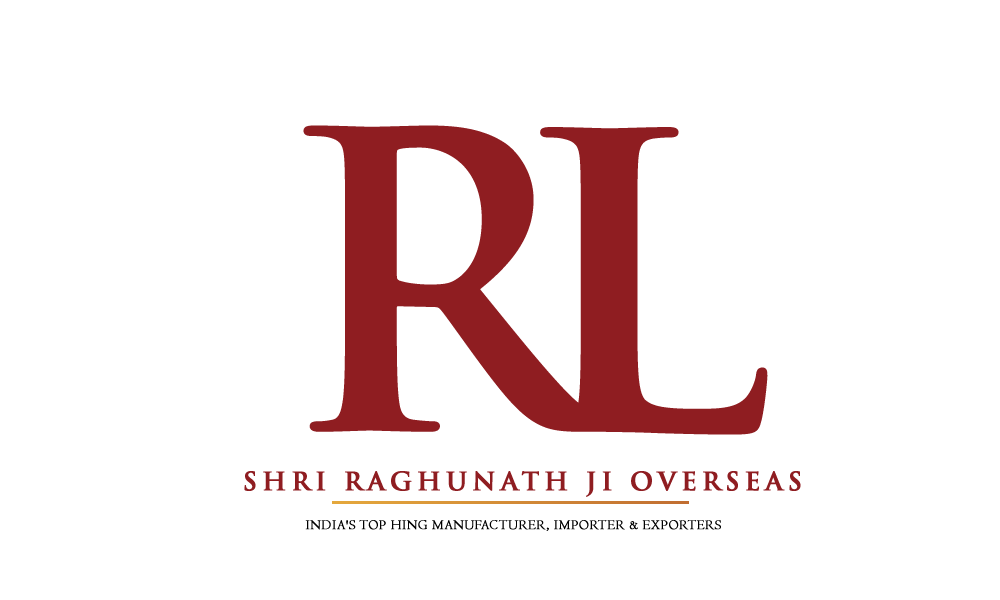
<style>
.page{position:relative;width:1000px;height:600px;background:#ffffff}
.page>*{position:absolute;margin:0}
.t1{font:24.7px "TrajanPro-Bold";letter-spacing:0.18em;color:#8f1d21;text-transform:uppercase;font-weight:bold}
.t2{font:13.7px "Centaur";letter-spacing:0.04em;color:#000000;text-transform:uppercase;font-weight:bold;scale:0.96 1}
</style>
<div class="page">
<p class="t1" style="left:244px;top:471px;width:557px;height:26px">shri raghunath JI overseas</p>
<p class="t2" style="left:305px;top:520px;width:416px;height:11px">India's Top Hing Manufacturer, Importer &amp; Exporters</p>
</div>
